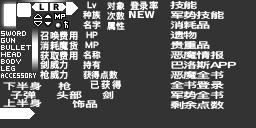
<style>
.page{position:relative;width:256px;height:128px;background:#333333}
.page>*{position:absolute;margin:0}
.t1{font:8.7px/10px "DFKingGothicSC14-Semibold";letter-spacing:0.005em;color:#ffffff}
.t2{font:9.3px "DFKingGothicSC14-Semibold";letter-spacing:0.005em;color:#ffffff}
.t3{font:8.4px/10px "DFKingGothicSC14-Semibold";letter-spacing:-0.075em;color:#ffffff;scale:1.71 1}
.t4{font:9.3px/9.6px "DFKingGothicSC14-Semibold";letter-spacing:0.005em;color:#ffffff}
.t5{font:8.7px "DFKingGothicSC14-Semibold";letter-spacing:0.005em;color:#ffffff}
.t6{font:8.4px/8.7px "DFKingGothicSC14-Semibold";letter-spacing:0.005em;color:#ffffff;scale:1.56 1}
.t7{font:8.4px "DFKingGothicSC14-Semibold";letter-spacing:0.005em;color:#ffffff;scale:1.56 1}
.t8{font:9.3px "DFKingGothicSC14-Semibold";letter-spacing:0.165em;color:#ffffff}
.t9{font:8.4px "DFKingGothicSC14-Semibold";letter-spacing:0.005em;color:#ffffff;scale:1.43 1}
</style>
<div class="page">
<p class="t1" style="left:83px;top:1px;width:18px;height:68px;text-align:center">Lv<br>种族<br>名字<br>HP<br>MP<br>名称<br>持有</p>
<p class="t1" style="left:107px;top:1px;width:18px;height:29px;text-align:center">对象<br>次数<br>属性</p>
<p class="t2" style="left:130px;top:1px;width:28px;height:10px">登录率</p>
<p class="t3" style="left:170px;top:1px;width:67px;height:108px">技能<br>军势技能<br>消耗品<br>遗物<br>贵重品<br>恶魔情报<br>巴洛斯APP<br>恶魔全书<br>全书登录<br>军势全书<br>剩余点数</p>
<p class="t4" style="left:40px;top:31px;width:38px;height:49px">召唤费用<br>消耗魔货<br>获取费用<br>剑威力<br>枪威力</p>
<p class="t5" style="left:83px;top:70px;width:35px;height:9px">获得点数</p>
<p class="t6" style="left:3px;top:81px;width:39px;height:26px;text-align:center">下半身<br>子弹<br>上半身</p>
<p class="t7" style="left:58px;top:82px;width:13px;height:8px">枪</p>
<p class="t8" style="left:90px;top:80px;width:32px;height:10px">已获得</p>
<p class="t7" style="left:56px;top:91px;width:26px;height:8px">头部</p>
<p class="t7" style="left:72px;top:100px;width:26px;height:8px">饰品</p>
<p class="t9" style="left:102px;top:91px;width:12px;height:8px">剑</p>
</div>
